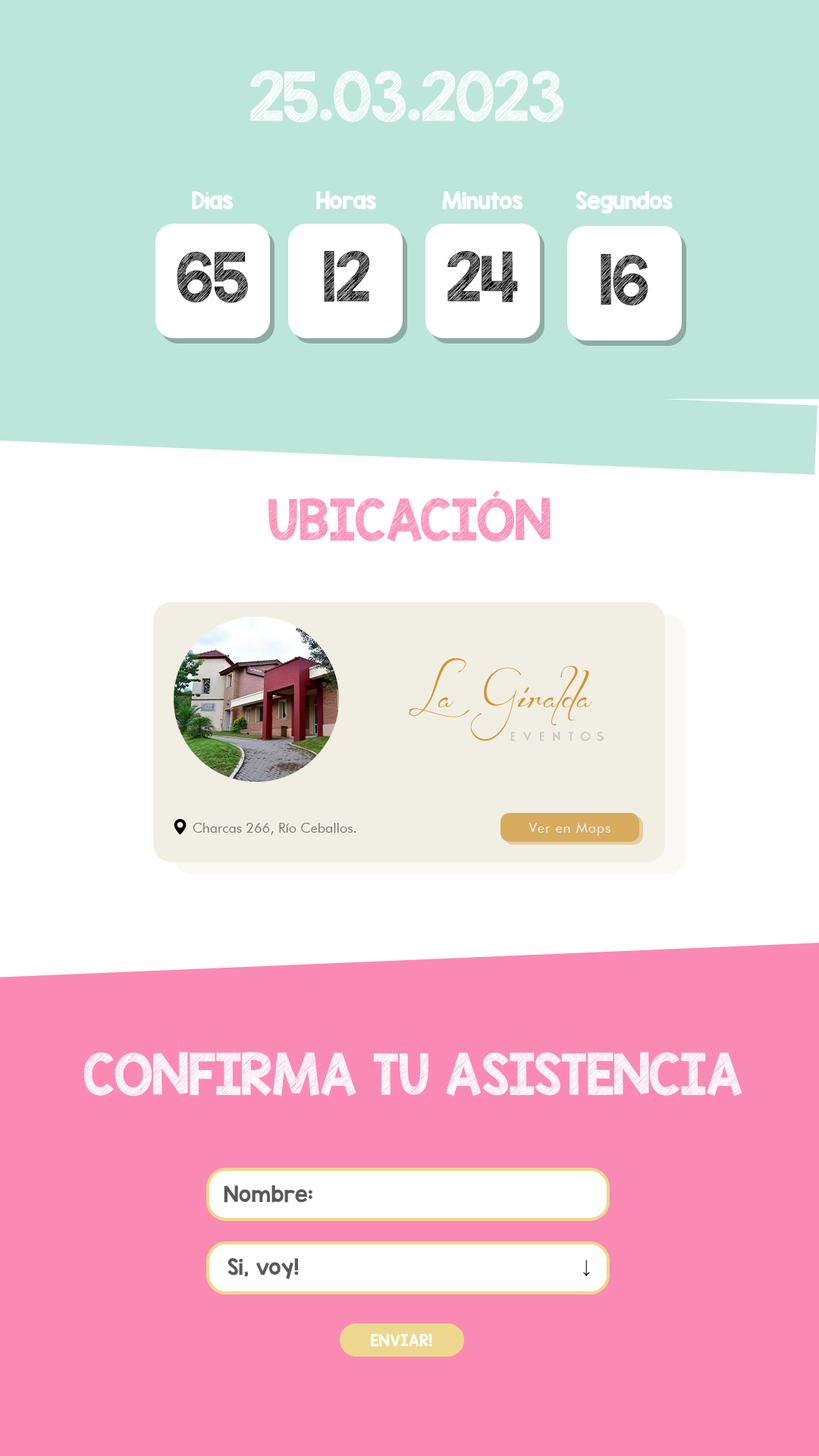
<style>
.page{position:relative;width:819px;height:1456px;background:#ffffff}
.page>*{position:absolute;margin:0}
.t1{font:54.6px "KGBlankSpaceSketch";color:#ffffff}
.t2{font:19px "KGBlankSpaceSketch";color:#ffffff}
.t3{font:54.6px "KGBlankSpaceSketch";color:#000000}
.t4{font:45.5px "KGBlankSpaceSketch";color:#fa8ab4}
.t5{font:13.6px "FuturaBT-Book";color:#727273}
.t6{font:13.6px "FuturaBT-Book";letter-spacing:0.05em;color:#efefef}
.t7{font:45.5px "KGBlankSpaceSketch";color:#ffffff}
.t8{font:19px "KGBlankSpaceSolid";color:#ffffff}
.t9{font:19px "KGBlankSpaceSolid";color:#595959}
.t10{font:19px "Arial-BoldMT";color:#000000}
.t11{font:13.6px "KGBlankSpaceSolid";color:#ffffff}
</style>
<div class="page">
<p class="t1" style="left:250px;top:70px;width:313px;height:53px">25.03.2023</p>
<p class="t2" style="left:192px;top:191px;width:41px;height:18px">Días</p>
<p class="t2" style="left:316px;top:191px;width:60px;height:18px">Horas</p>
<p class="t2" style="left:442px;top:191px;width:80px;height:19px">Minutos</p>
<p class="t2" style="left:576px;top:191px;width:97px;height:23px">Segundos</p>
<p class="t3" style="left:177px;top:251px;width:71px;height:52px">65</p>
<p class="t3" style="left:324px;top:250px;width:46px;height:52px">12</p>
<p class="t3" style="left:447px;top:250px;width:71px;height:53px">24</p>
<p class="t3" style="left:601px;top:253px;width:47px;height:53px">16</p>
<p class="t4" style="left:268px;top:490px;width:283px;height:52px">UBICACIÓN</p>
<p class="t5" style="left:193px;top:823px;width:163px;height:12px">Charcas 266, Río Ceballos.</p>
<p class="t6" style="left:529px;top:823px;width:81px;height:13px">Ver en Maps</p>
<p class="t7" style="left:84px;top:1052px;width:658px;height:45px">CONFIRMA TU ASISTENCIA</p>
<p class="t8" style="left:224px;top:1185px;width:198px;height:21px"><span class="t9">Nombre: </span>completo:</p>
<p class="t9" style="left:227px;top:1258px;width:72px;height:21px">Si, voy!</p>
<p class="t10" style="left:582px;top:1260px;width:8px;height:16px">↓</p>
<p class="t11" style="left:371px;top:1334px;width:61px;height:13px">ENVIAR!</p>
</div>
